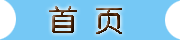
<style>
.page{position:relative;width:180px;height:40px;background:#75c8f5}
.page>*{position:absolute;margin:0}
.t1{font:30px "STYuanti-SC-Regular"}
</style>
<div class="page">
<p class="t1" style="left:49px;top:6px;width:73px;height:28px">首  页</p>
</div>
